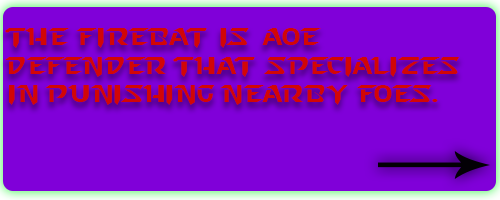
<style>
.page{position:relative;width:500px;height:200px;background:#8000d9}
.page>*{position:absolute;margin:0}
.t1{font:24px "StarcraftNormal";color:#d20606}
</style>
<div class="page">
<p class="t1" style="left:5px;top:28px;width:455px;height:77px">The firebat is aoe <br>defender that specializes in punishing nearby foes.</p>
</div>
